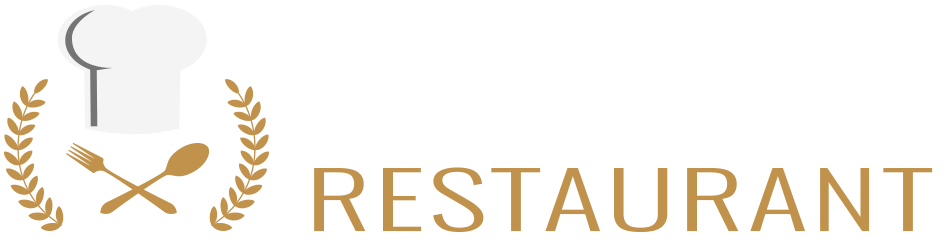
<style>
.page{position:relative;width:948px;height:240px;background:#ffffff}
.page>*{position:absolute;margin:0}
.t1{font:77.4px "Oswald-Light";letter-spacing:0.02em;color:#c1924b;text-transform:uppercase;scale:1.67 1}
</style>
<div class="page">
<p class="t1" style="left:314px;top:167px;width:619px;height:65px">Restaurant</p>
</div>
